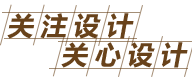
<style>
.page{position:relative;width:192px;height:83px;background:#ffffff}
.page>*{position:absolute;margin:0}
.t1{font:26px "MicrosoftYaHei-Bold";letter-spacing:0.26em;color:#68421a;font-style:italic}
</style>
<div class="page">
<p class="t1" style="left:7px;top:13px;width:127px;height:26px">关注设计</p>
<p class="t1" style="left:61px;top:42px;width:127px;height:26px">关心设计</p>
</div>
